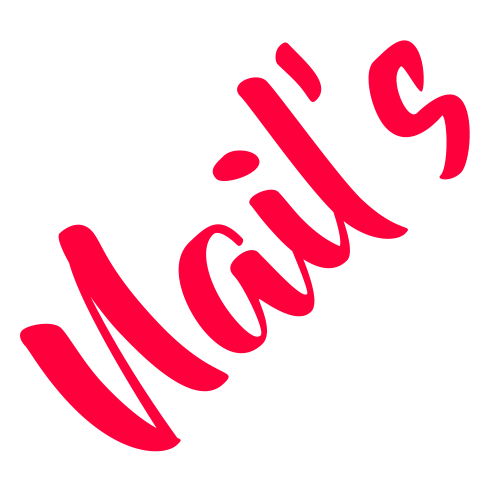
<style>
.page{position:relative;width:500px;height:500px;background:#ffffff}
.page>*{position:absolute;margin:0}
.t1{font:231.1px "BeyondTheMountains";letter-spacing:0.002em;color:#fe003c}
</style>
<div class="page">
<p class="t1" style="left:20px;top:40px;width:450px;height:412px;rotate:-43deg">Nail’s</p>
</div>
